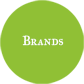
<style>
.page{position:relative;width:84px;height:84px;background:#90c035}
.page>*{position:absolute;margin:0}
.t1{font:11px "IM_FELL_Great_Primer_Roman_SC";color:#ffffff}
</style>
<div class="page">
<p class="t1" style="left:22px;top:35px;width:42px;height:11px">Brands</p>
</div>
